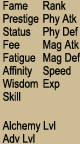
<style>
.page{position:relative;width:80px;height:144px;background:#cebd94}
.page>*{position:absolute;margin:0}
.t1{font:12px/13px "ArialNarrow";color:#080808}
</style>
<div class="page">
<p class="t1" style="left:2px;top:1px;width:37px;height:100px">Fame<br> Prestige<br> Status<br> Fee<br> Fatigue<br> Affinity<br> Wisdom<br> Skill</p>
<p class="t1" style="left:43px;top:1px;width:38px;height:90px">Rank<br> Phy Atk<br> Phy Def<br> Mag Atk<br> Mag Def<br> Speed<br> Exp</p>
<p class="t1" style="left:2px;top:121px;width:54px;height:22px">Alchemy Lvl<br> Adv Lvl</p>
</div>
